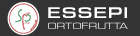
<style>
.page{position:relative;width:140px;height:36px;background:#333333}
.page>*{position:absolute;margin:0}
.t1{font:9.4px/10.2px "EurostileExt-Reg";letter-spacing:-0.025em;color:#ffffff;text-transform:uppercase}
.t2{font:16.3px/12.2px "EurostileExt-Med";letter-spacing:0.02em;color:#ffffff;text-transform:uppercase}
</style>
<div class="page">
<p class="t1" style="left:48px;top:7px;width:80px;height:22px;text-align:center"><span class="t2">Essepi<br></span>Ortofrutta</p>
</div>
